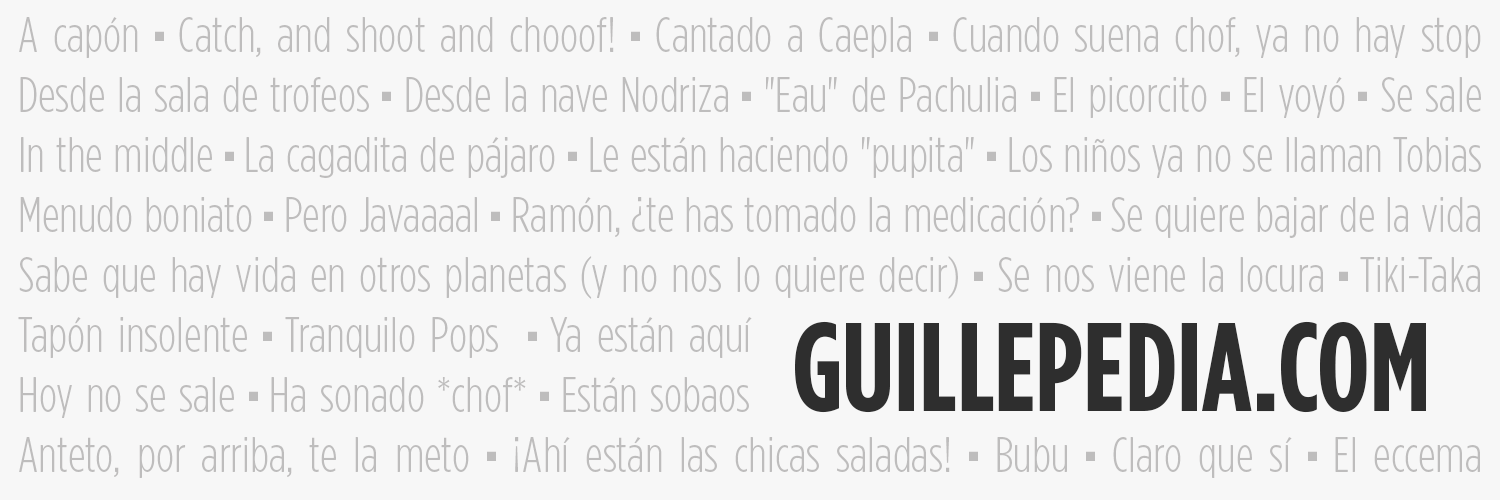
<style>
.page{position:relative;width:1500px;height:500px;background:#f7f7f7}
.page>*{position:absolute;margin:0}
.t1{font:50px "GothamCondensed-Light";color:#bebdbd}
.t2{font:50px "GothamCondensed-Ultra";color:#bebdbd}
.t3{font:125px "GothamCondensed-Bold";color:#2e2e2e}
</style>
<div class="page">
<p class="t1" style="left:18px;top:17px;width:1463px;height:461px;text-align:justify">A capón <span class="t2">·</span> Catch, and shoot and chooof! <span class="t2">·</span> Cantado a Caepla <span class="t2">·</span> Cuando suena chof, ya no hay stop<br>Desde la sala de trofeos <span class="t2">·</span> Desde la nave Nodriza <span class="t2">·</span> "Eau" de Pachulia <span class="t2">·</span> El picorcito <span class="t2">·</span> El yoyó <span class="t2">·</span> Se sale<br>In the middle <span class="t2">· </span>La cagadita de pájaro <span class="t2">·</span> Le están haciendo "pupita" <span class="t2">·</span> Los niños ya no se llaman Tobias<br>Menudo boniato <span class="t2">·</span> Pero Javaaaal <span class="t2">·</span> Ramón, ¿te has tomado la medicación? <span class="t2">· </span>Se quiere bajar de la vida<br>Sabe que hay vida en otros planetas (y no nos lo quiere decir) <span class="t2">·</span> Se nos viene la locura <span class="t2">· </span>Tiki-Taka<br>Tapón insolente <span class="t2">· </span>Tranquilo Pops  <span class="t2">· </span>Ya están aquí  Pásasela a Kluivert <span class="t2">·</span> Jean Reno (El Profesional)<br>Hoy no se sale <span class="t2">· </span>Ha sonado *chof* <span class="t2">· </span>Están sobaos   Es un partido disfrutón <span class="t2">·</span> Es un palo <span class="t2">·</span> Edu Soto<br>Anteto, por arriba, te la meto <span class="t2">·</span> ¡Ahí están las chicas saladas! <span class="t2">·</span> Bubu <span class="t2">·</span> Claro que sí <span class="t2">·</span> El eccema<br>Antetobrazo</p>
<p class="t3" style="left:795px;top:321px;width:631px;height:92px">GUILLEPEDIA.COM</p>
</div>
